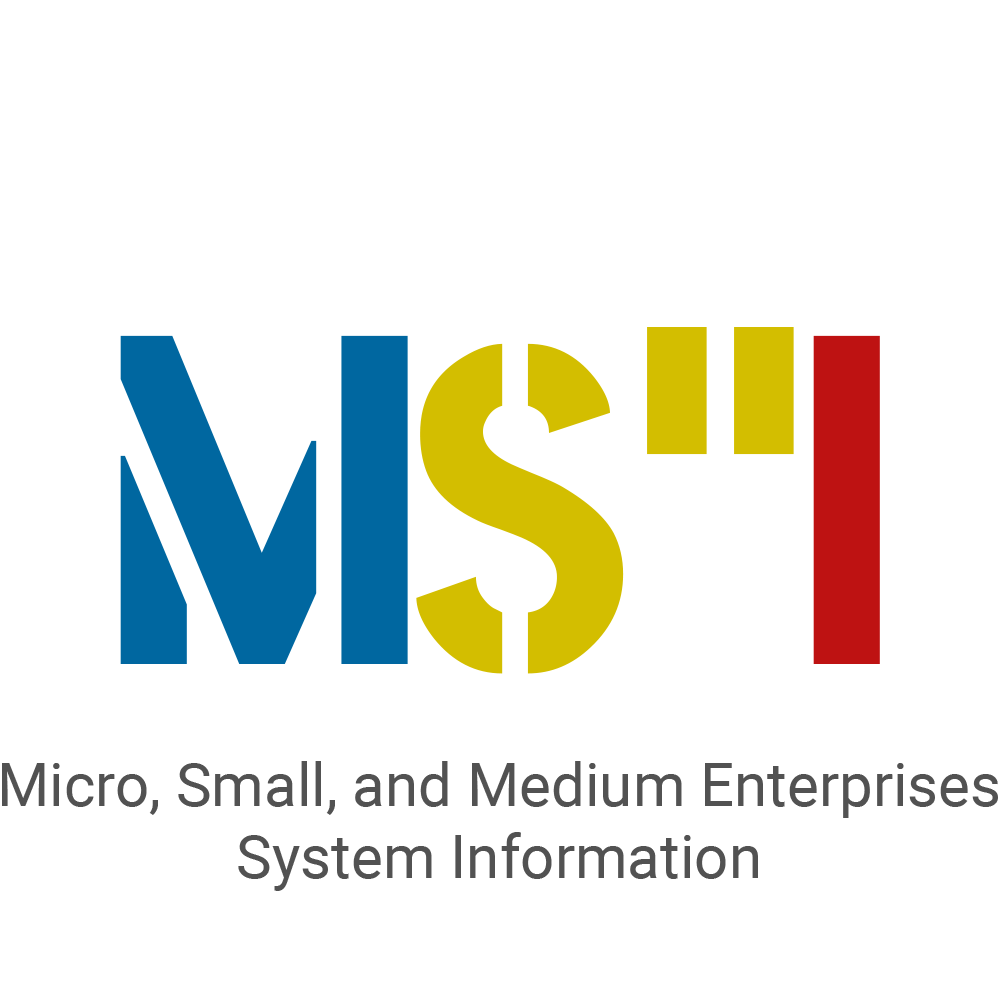
<style>
.page{position:relative;width:1000px;height:1000px;background:#ffffff}
.page>*{position:absolute;margin:0}
.t1{font:480px "PostNoBillsJaffna-ExtraBold";color:#d3be00}
.t2{font:480px "PostNoBillsJaffna-ExtraBold";color:#0067a0}
.t3{font:480px "PostNoBillsJaffna-ExtraBold";color:#be1212}
.t4{font:60px "Roboto-Regular";color:#525252}
</style>
<div class="page">
<p class="t1" style="left:416px;top:327px;width:378px;height:347px">S’’</p>
<p class="t2" style="left:120px;top:335px;width:288px;height:329px">M</p>
<p class="t3" style="left:813px;top:335px;width:67px;height:329px">I</p>
<p class="t4" style="left:2px;top:761px;width:996px;height:130px;text-align:center">Micro, Small, and Medium Enterprises<br>System Information</p>
</div>
